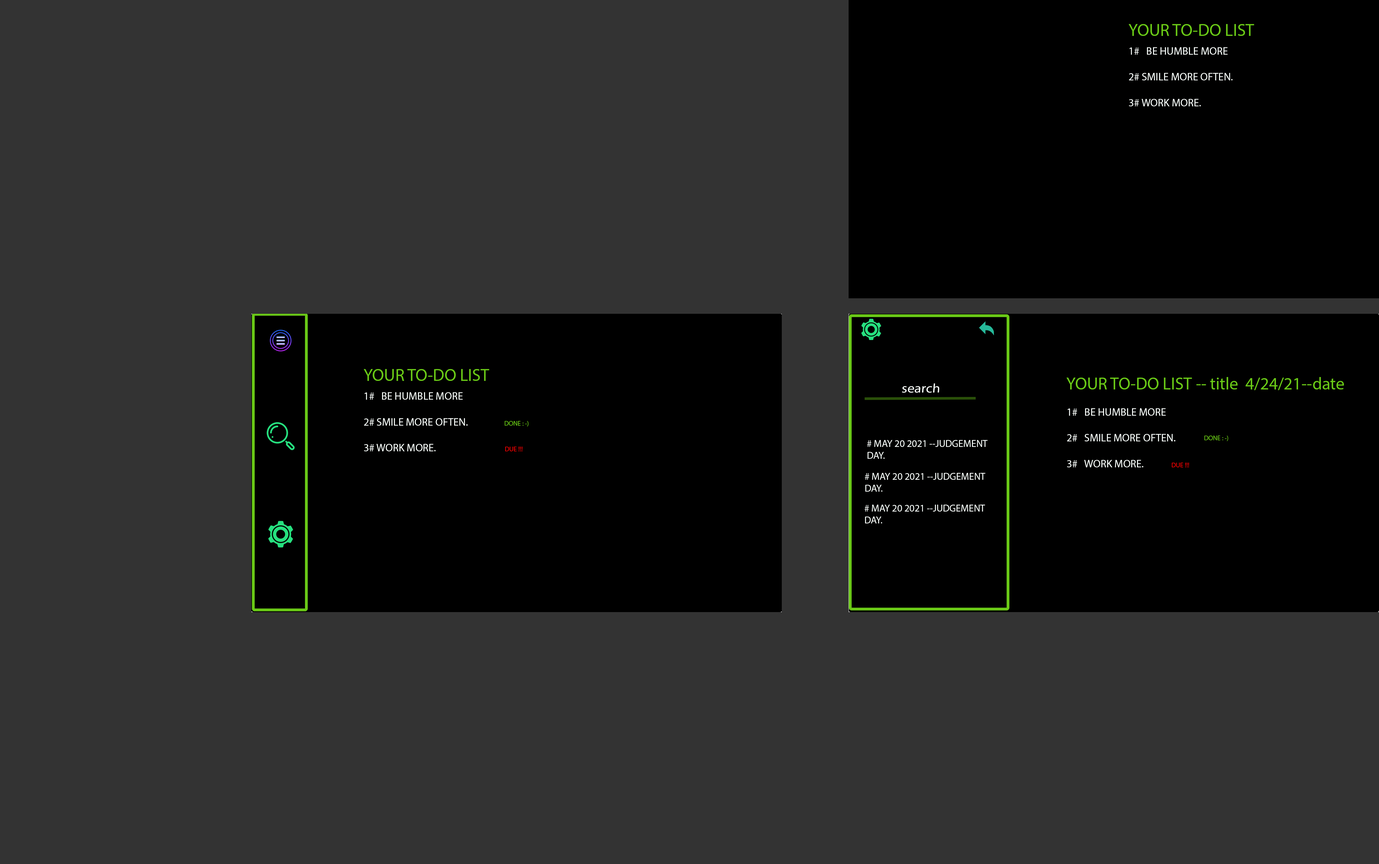
<style>
.page{position:relative;width:1379px;height:864px;background:#333333}
.page>*{position:absolute;margin:0}
.t1{font:17.2px "MyriadPro-Regular";color:#6ac917}
.t2{font:10.8px "MyriadPro-Regular";color:#fafffc}
.t3{font:12.8px "MyriadPro-Regular";color:#fafffc;scale:1.11 1}
.t4{font:6.6px "MyriadPro-Regular";color:#6ac917}
.t5{font:6.6px "MyriadPro-Regular";color:#ff0000}
.t6{font:9.9px "MyriadPro-Regular";color:#fafffc}
</style>
<div class="page">
<p class="t1" style="left:1129px;top:24px;width:126px;height:12px">YOUR TO-DO LIST</p>
<p class="t2" style="left:1129px;top:47px;width:104px;height:59px">1#   BE HUMBLE MORE <br><br>2# SMILE MORE OFTEN.<br><br>3# WORK MORE.</p>
<p class="t1" style="left:364px;top:369px;width:125px;height:12px">YOUR TO-DO LIST</p>
<p class="t1" style="left:1067px;top:377px;width:277px;height:13px">YOUR TO-DO LIST -- title  4/24/21--date</p>
<p class="t3" style="left:902px;top:384px;width:38px;height:9px">search</p>
<p class="t2" style="left:364px;top:392px;width:104px;height:60px">1#   BE HUMBLE MORE <br><br>2# SMILE MORE OFTEN.<br><br>3# WORK MORE.</p>
<p class="t2" style="left:1067px;top:408px;width:109px;height:60px">1#   BE HUMBLE MORE <br><br>2#   SMILE MORE OFTEN.<br><br>3#   WORK MORE.</p>
<p class="t4" style="left:505px;top:421px;width:24px;height:6px">DONE : -)</p>
<p class="t4" style="left:1205px;top:436px;width:24px;height:5px">DONE : -)</p>
<p class="t5" style="left:505px;top:447px;width:18px;height:5px">DUE !!!</p>
<p class="t6" style="left:867px;top:440px;width:121px;height:19px"># MAY 20 2021 --JUDGEMENT<br>DAY.</p>
<p class="t6" style="left:865px;top:473px;width:121px;height:19px"># MAY 20 2021 --JUDGEMENT<br>DAY.</p>
<p class="t5" style="left:1172px;top:463px;width:18px;height:5px">DUE !!!</p>
<p class="t6" style="left:865px;top:505px;width:120px;height:19px"># MAY 20 2021 --JUDGEMENT<br>DAY.</p>
</div>
